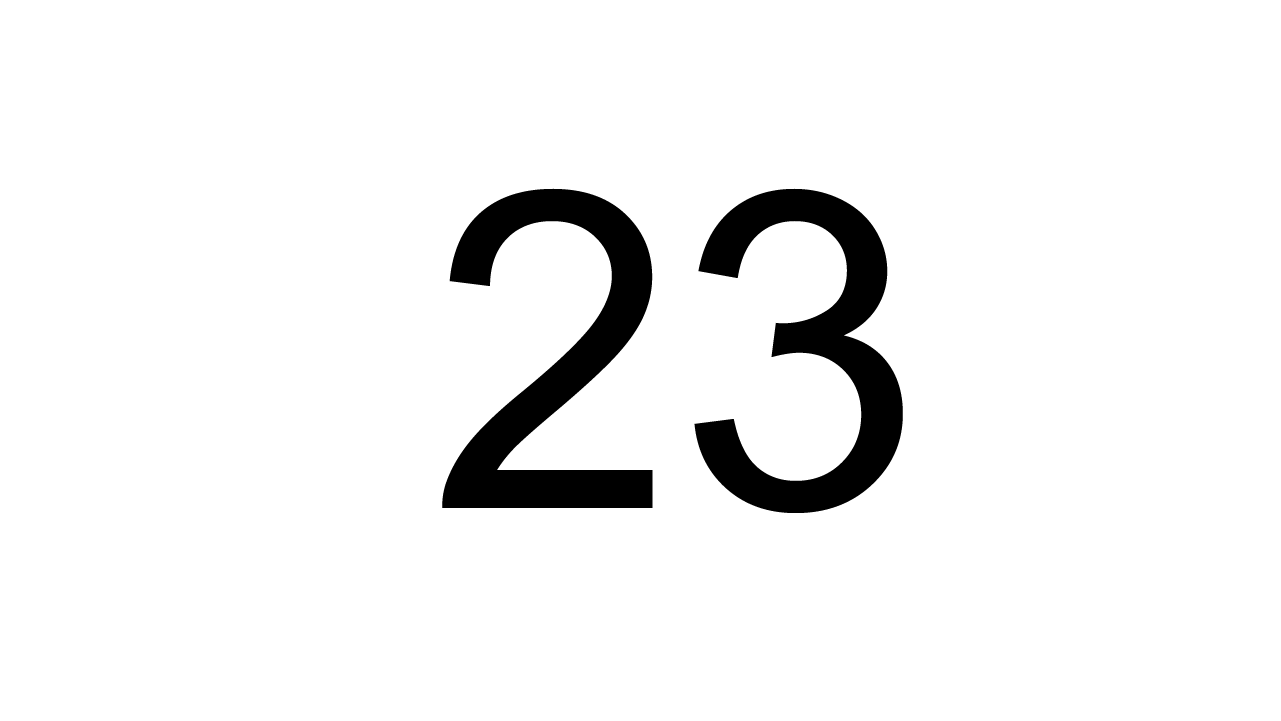
<style>
.page{position:relative;width:1281px;height:721px;background:#ffffff}
.page>*{position:absolute;margin:0}
.t1{font:444.1px "ArialMT";color:#000000}
</style>
<div class="page">
<p class="t1" style="left:442px;top:188px;width:461px;height:325px">23</p>
</div>
